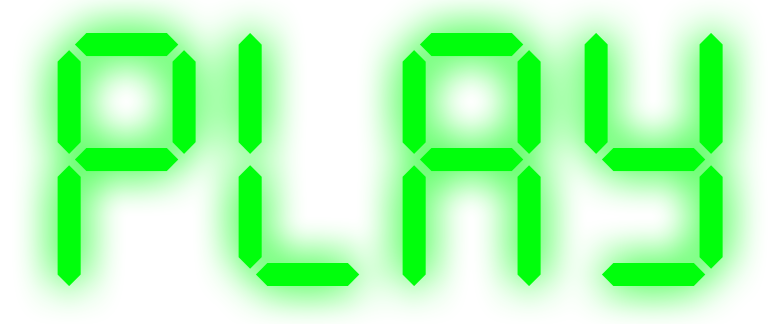
<style>
.page{position:relative;width:777px;height:324px}
.page>*{position:absolute;margin:0}
.t1{font:361.2px "SevenSegmentRegular";color:#00ff0c}
</style>
<div class="page">
<p class="t1" style="left:57px;top:33px;width:666px;height:253px">Play</p>
</div>
